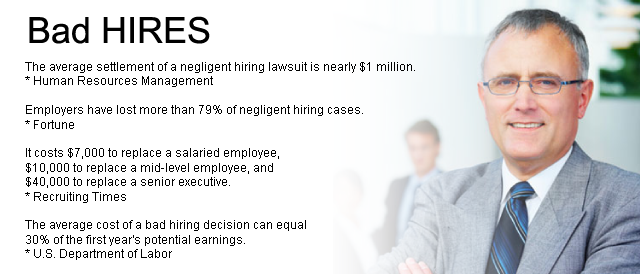
<style>
.page{position:relative;width:640px;height:274px;background:#ffffff}
.page>*{position:absolute;margin:0}
.t1{font:36px "ArialMT";color:#000000}
.t2{font:12px "ArialMT";color:#000000}
</style>
<div class="page">
<p class="t1" style="left:29px;top:16px;width:181px;height:28px">Bad HIRES</p>
<p class="t2" style="left:25px;top:62px;width:390px;height:198px">The average settlement of a negligent hiring lawsuit is nearly $1 million.<br>* Human Resources Management<br><br>Employers have lost more than 79% of negligent hiring cases.<br>* Fortune<br><br>It costs $7,000 to replace a salaried employee, <br>$10,000 to replace a mid-level employee, and <br>$40,000 to replace a senior executive.<br>* Recruiting Times<br><br>The average cost of a bad hiring decision can equal <br>30% of the first year's potential earnings.<br>* U.S. Department of Labor</p>
</div>
